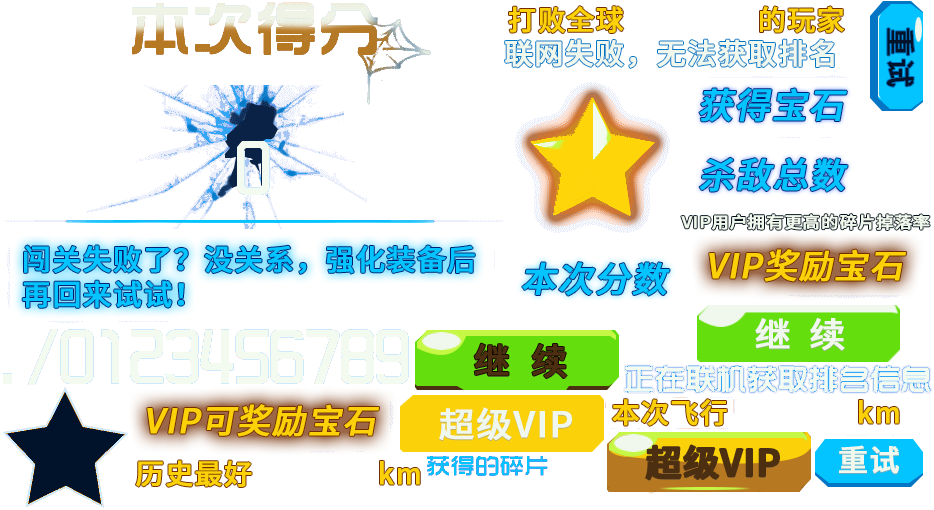
<style>
.page{position:relative;width:934px;height:510px;background:#ffffff}
.page>*{position:absolute;margin:0}
.t1{font:28px "SourceHanSansCN-Medium";letter-spacing:0.02em;color:#fbd209;font-weight:bold}
.t2{font:29.4px "SourceHanSansCN-Medium";letter-spacing:0.02em;color:#01122b;font-weight:bold}
.t3{font:29px "SourceHanSansCN-Medium";letter-spacing:0.02em;color:#f0f7ec;font-weight:bold}
.t4{font:35.4px "SourceHanSansCN-Medium";letter-spacing:0.02em;color:#04c4ff;font-weight:bold;font-style:italic}
.t5{font:16.2px "SourceHanSansCN-Medium";letter-spacing:0.02em;color:#f0f7ec;font-weight:bold;scale:1.08 1}
.t6{font:29px/35px "SourceHanSansCN-Medium";letter-spacing:0.02em;color:#04c4ff;font-weight:bold}
.t7{font:33.7px "SourceHanSansCN-Medium";letter-spacing:0.02em;color:#fbd209;font-weight:bold;font-style:italic}
.t8{font:34.5px "SourceHanSansCN-Medium";letter-spacing:0.52em;color:#f0f7ec;font-weight:bold;scale:1.05 1}
.t9{font:36px "SourceHanSansCN-Medium";letter-spacing:0.6em;color:#4b2f10;font-weight:bold}
.t10{font:34.2px "SourceHanSansCN-Medium";letter-spacing:0.02em;color:#f0f7ec;font-weight:bold;scale:1.05 1}
.t11{font:36px "SourceHanSansCN-Medium";letter-spacing:0.02em;color:#4b2f10;font-weight:bold}
.t12{font:30.2px "SourceHanSansCN-Medium";letter-spacing:0.02em;color:#f0f7ec;font-weight:bold}
</style>
<div class="page">
<p class="t1" style="left:508px;top:6px;width:116px;height:27px">打败全球</p>
<p class="t1" style="left:760px;top:6px;width:84px;height:27px">的玩家</p>
<p class="t2" style="left:887px;top:28px;width:28px;height:59px;rotate:90deg">重试</p>
<p class="t3" style="left:657px;top:39px;width:177px;height:28px">无法获取排名</p>
<p class="t4" style="left:699px;top:88px;width:148px;height:34px">获得宝石</p>
<p class="t4" style="left:699px;top:158px;width:149px;height:34px">杀敌总数</p>
<p class="t5" style="left:681px;top:214px;width:249px;height:16px">VIP用户拥有更高的碎片掉落率</p>
<p class="t6" style="left:22px;top:245px;width:453px;height:63px">闯关失败了？没关系，强化装备后<br>再回来试试！</p>
<p class="t7" style="left:709px;top:249px;width:197px;height:33px">VIP奖励宝石</p>
<p class="t4" style="left:522px;top:262px;width:148px;height:34px">本次分数</p>
<p class="t8" style="left:755px;top:318px;width:90px;height:33px">继续</p>
<p class="t9" style="left:474px;top:343px;width:93px;height:35px">继续</p>
<p class="t1" style="left:612px;top:399px;width:115px;height:27px">本次飞行</p>
<p class="t1" style="left:859px;top:400px;width:40px;height:24px">km</p>
<p class="t7" style="left:147px;top:404px;width:232px;height:33px">VIP可奖励宝石</p>
<p class="t10" style="left:439px;top:407px;width:133px;height:33px">超级VIP</p>
<p class="t11" style="left:646px;top:445px;width:133px;height:35px">超级VIP</p>
<p class="t12" style="left:839px;top:445px;width:60px;height:29px">重试</p>
<p class="t1" style="left:136px;top:460px;width:116px;height:27px">历史最好</p>
<p class="t1" style="left:380px;top:461px;width:40px;height:24px">km</p>
</div>
